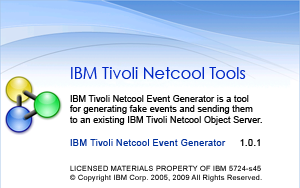
<style>
.page{position:relative;width:300px;height:188px;background:#ffffff}
.page>*{position:absolute;margin:0}
.t1{font:16px "CenturyGothic";color:#0028c6}
.t2{font:8.7px "ArialMT";letter-spacing:0.03em;color:#060606}
.t3{font:9.3px "ArialMT";letter-spacing:0.03em;color:#00309c}
.t4{font:9.3px "ArialMT";letter-spacing:0.03em;color:#000000}
.t5{font:7.3px "ArialMT";letter-spacing:0.03em;color:#020202}
</style>
<div class="page">
<p class="t1" style="left:71px;top:67px;width:175px;height:12px">IBM Tivoli Netcool Tools</p>
<p class="t2" style="left:70px;top:95px;width:192px;height:30px">IBM Tivoli Netcool Event Generator is a tool <br>for generating fake events and sending them <br>to an existing IBM Tivoli Netcool Object Server.</p>
<p class="t3" style="left:70px;top:139px;width:190px;height:7px">IBM Tivoli Netcool Event Generator     <span class="t4">1.0.1</span></p>
<p class="t5" style="left:70px;top:165px;width:192px;height:17px">LICENSED MATERIALS PROPERTY OF IBM 5724-s45 <br>© Copyright IBM Corp. 2005, 2009 All Rights Reserved.</p>
</div>
